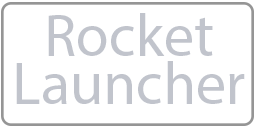
<style>
.page{position:relative;width:256px;height:128px;background:#ffffff}
.page>*{position:absolute;margin:0}
.t1{font:60px "MyriadPro-Regular";color:#c1c4cc}
</style>
<div class="page">
<p class="t1" style="left:48px;top:13px;width:165px;height:43px">Rocket</p>
<p class="t1" style="left:16px;top:61px;width:229px;height:43px">Launcher</p>
</div>
